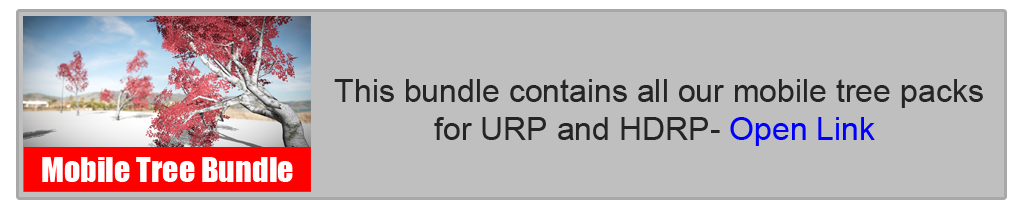
<style>
.page{position:relative;width:1024px;height:210px;background:#bfbfbf}
.page>*{position:absolute;margin:0}
.t1{font:32px "ArialMT";color:#252525}
.t2{font:32px "ArialMT";color:#0000ff}
.t3{font:32px "Impact";color:#ffffff}
</style>
<div class="page">
<p class="t1" style="left:334px;top:79px;width:649px;height:67px;text-align:center">This bundle contains all our mobile tree packs <br>for URP and HDRP- <span class="t2">Open Link</span></p>
<p class="t3" style="left:42px;top:157px;width:251px;height:25px">Mobile Tree Bundle</p>
</div>
